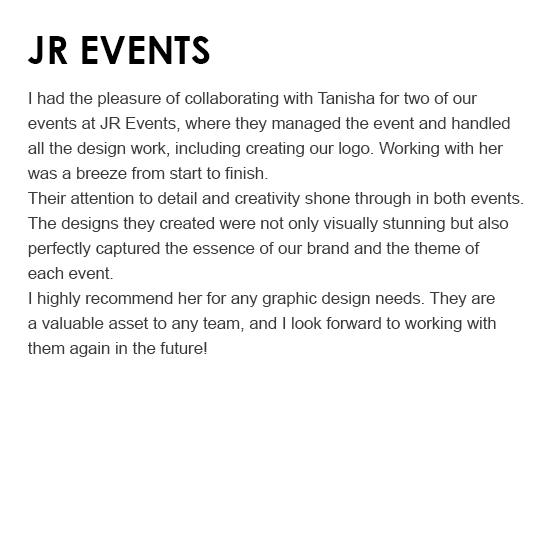
<style>
.page{position:relative;width:559px;height:559px;background:#ffffff}
.page>*{position:absolute;margin:0}
.t1{font:38.6px "CenturyGothic-Bold";color:#000000;text-transform:uppercase}
.t2{font:16.7px/25px "ArialMT";color:#3a3a3a}
</style>
<div class="page">
<p class="t1" style="left:27px;top:36px;width:183px;height:28px">JR Events</p>
<p class="t2" style="left:27px;top:92px;width:497px;height:265px">I had the pleasure of collaborating with Tanisha for two of our <br>events at JR Events, where they managed the event and handled <br>all the design work, including creating our logo. Working with her <br>was a breeze from start to finish.<br>Their attention to detail and creativity shone through in both events. <br>The designs they created were not only visually stunning but also <br>perfectly captured the essence of our brand and the theme of <br>each event.<br>I highly recommend her for any graphic design needs. They are <br>a valuable asset to any team, and I look forward to working with <br>them again in the future!</p>
</div>
